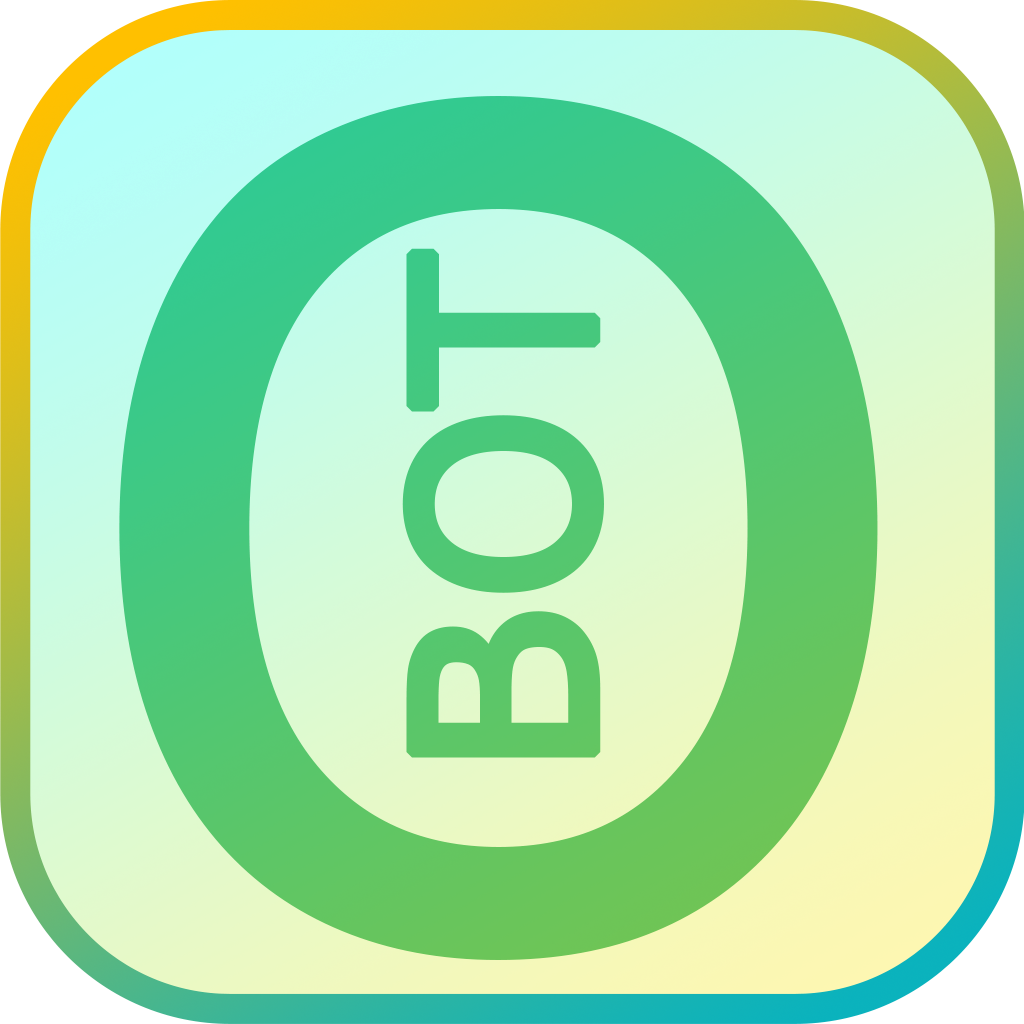
<style>
.page{position:relative;width:1024px;height:1024px}
.page>*{position:absolute;margin:0}
.t1{font:1114px "MSReferenceSansSerif";font-weight:bold}
.t2{font:251.5px "MSReferenceSansSerif";color:#53c771;font-weight:bold}
</style>
<div class="page">
<p class="t1" style="left:119px;top:96px;width:759px;height:864px">O</p>
<p class="t2" style="left:402px;top:248px;width:202px;height:510px;rotate:-90deg">BOT</p>
</div>
